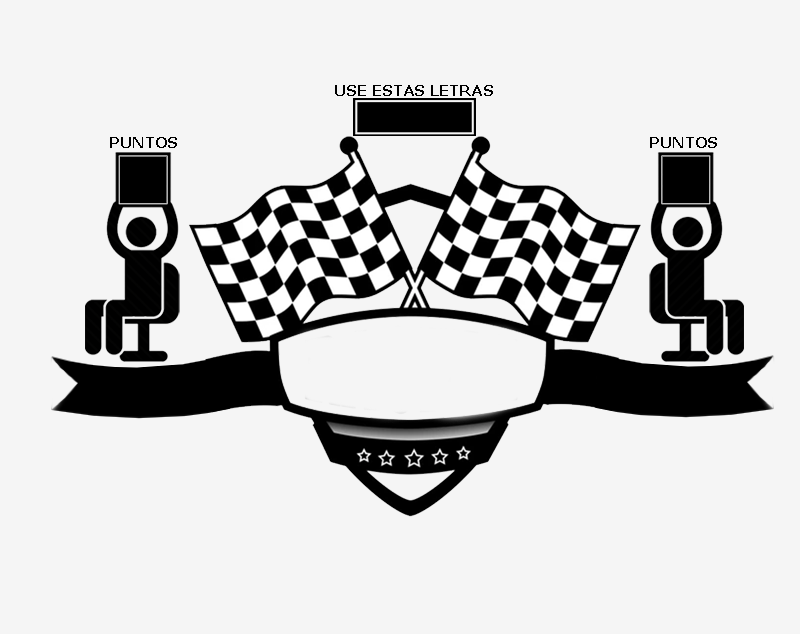
<style>
.page{position:relative;width:800px;height:634px;background:#f5f5f5}
.page>*{position:absolute;margin:0}
.t1{font:14.8px "Verdana-Bold";color:#000000}
</style>
<div class="page">
<p class="t1" style="left:335px;top:85px;width:158px;height:11px">USE ESTAS LETRAS</p>
<p class="t1" style="left:110px;top:137px;width:67px;height:11px">PUNTOS</p>
<p class="t1" style="left:650px;top:137px;width:67px;height:11px">PUNTOS</p>
</div>
